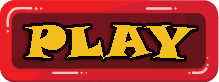
<style>
.page{position:relative;width:219px;height:82px}
.page>*{position:absolute;margin:0}
.t1{font:44.4px "SnapITC-Regular";color:#f4bf1e;scale:1.14 1}
</style>
<div class="page">
<p class="t1" style="left:25px;top:25px;width:171px;height:34px">PLAY</p>
</div>
